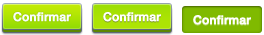
<style>
.page{position:relative;width:264px;height:35px;background:#ffffff}
.page>*{position:absolute;margin:0}
.t1{font:12px "HelveticaNeue-Medium";color:#f7fbff;font-weight:bold}
.t2{font:12px "HelveticaNeue-Medium";color:#ffffff;font-weight:bold}
</style>
<div class="page">
<p class="t1" style="left:13px;top:12px;width:58px;height:10px">Confirmar</p>
<p class="t2" style="left:103px;top:12px;width:58px;height:10px">Confirmar</p>
<p class="t2" style="left:193px;top:15px;width:58px;height:10px">Confirmar</p>
</div>
